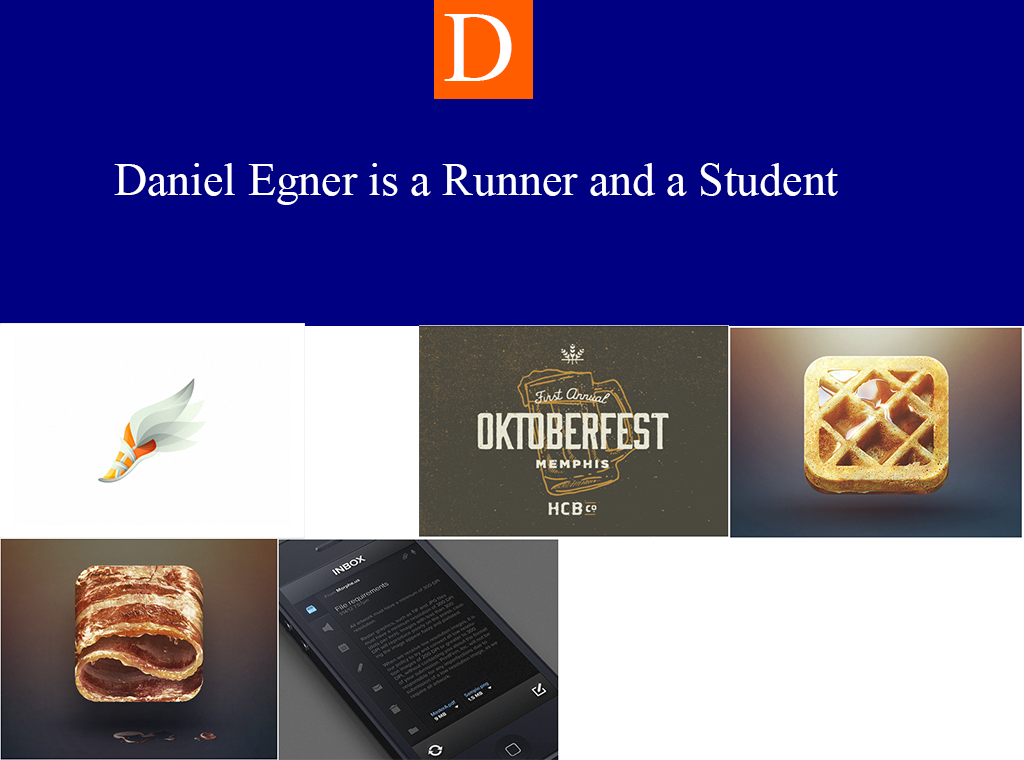
<style>
.page{position:relative;width:1024px;height:760px;background:#000082}
.page>*{position:absolute;margin:0}
.t1{font:100px "TimesNewRomanPSMT";color:#ffffff}
.t2{font:45.8px "TimesNewRomanPSMT";color:#ffffff}
</style>
<div class="page">
<p class="t1" style="left:444px;top:14px;width:68px;height:67px">D</p>
<p class="t2" style="left:114px;top:163px;width:724px;height:42px">Daniel Egner is a Runner and a Student</p>
</div>
